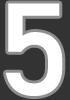
<style>
.page{position:relative;width:70px;height:100px;background:#333333}
.page>*{position:absolute;margin:0}
.t1{font:128.8px "Bahnschrift";color:#ffffff;scale:1.09 1}
</style>
<div class="page">
<p class="t1" style="left:6px;top:3px;width:57px;height:93px">5</p>
</div>
